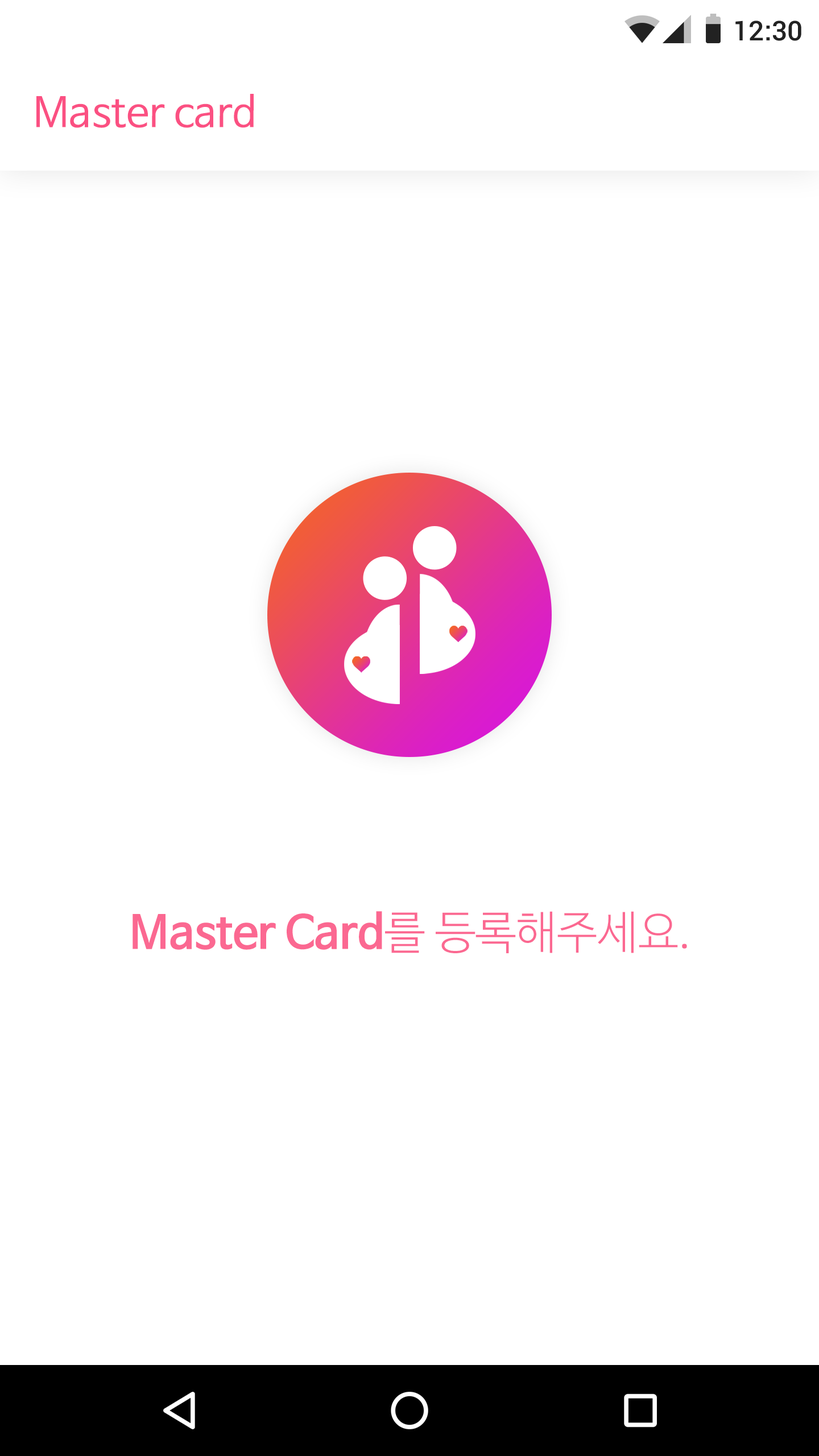
<style>
.page{position:relative;width:819px;height:1456px;background:#ffffff}
.page>*{position:absolute;margin:0}
.t1{font:27.3px "Roboto-Medium";color:#222222}
.t2{font:40.9px "NanumBarunGothic";color:#fb5082}
.t3{font:45.5px "NanumBarunGothicBold";color:#fb6792}
.t4{font:45.5px "NanumBarunGothicLight";color:#fb6792}
</style>
<div class="page">
<p class="t1" style="left:735px;top:20px;width:66px;height:21px">12:30</p>
<p class="t2" style="left:36px;top:94px;width:218px;height:34px">Master card</p>
<p class="t3" style="left:133px;top:911px;width:554px;height:42px">Master Card<span class="t4">를 등록해주세요.</span></p>
</div>
